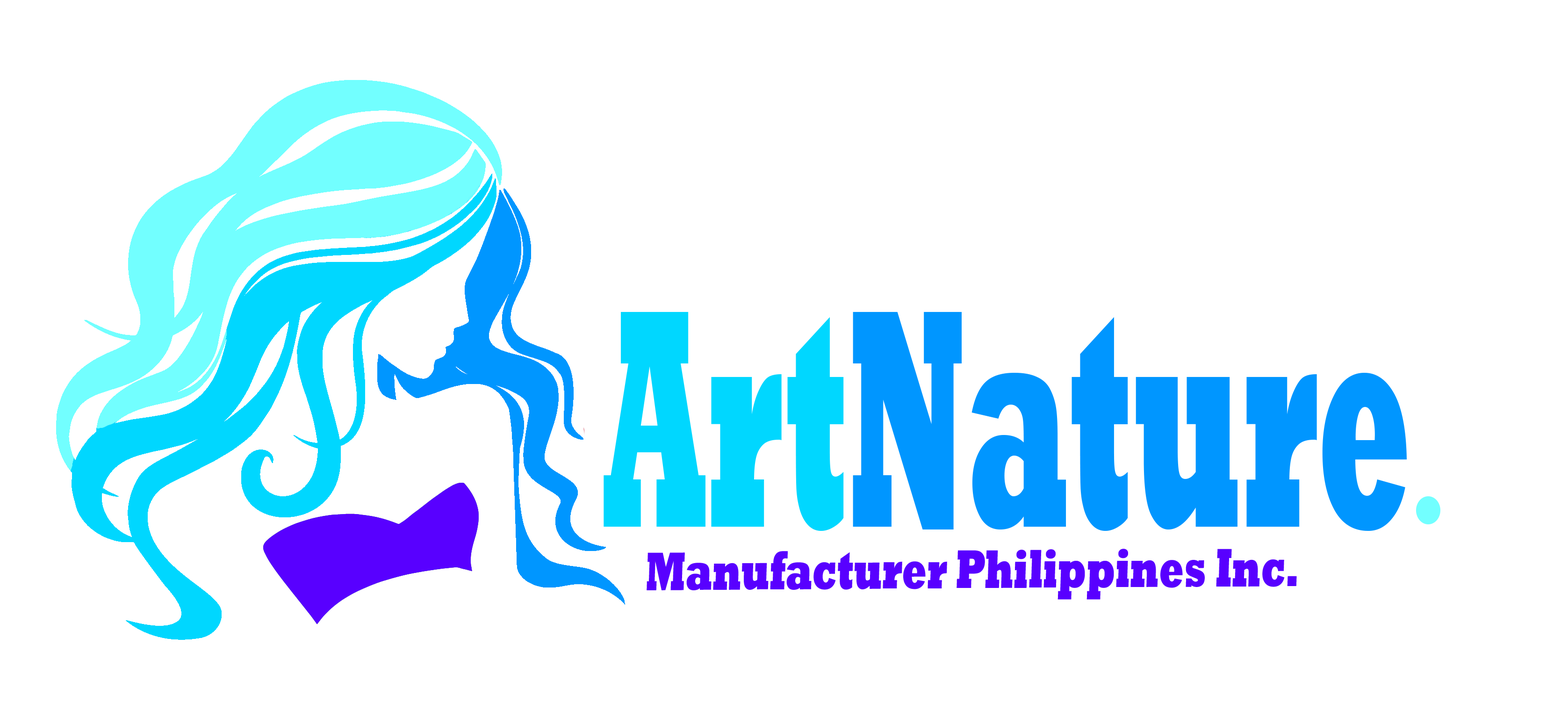
<style>
.page{position:relative;width:1568px;height:725px;background:#ffffff}
.page>*{position:absolute;margin:0}
.t1{font:316px "Rockwell-ExtraBold";color:#0096ff;scale:0.44 1}
.t2{font:316px "Rockwell-ExtraBold";color:#00d7ff;scale:0.44 1}
.t3{font:55.1px "Rockwell-ExtraBold";color:#5800ff;scale:0.65 1}
</style>
<div class="page">
<p class="t1" style="left:604px;top:311px;width:803px;height:220px"><span class="t2">Art</span>Nature</p>
<p class="t3" style="left:647px;top:548px;width:650px;height:51px">Manufacturer Philippines Inc.</p>
</div>
